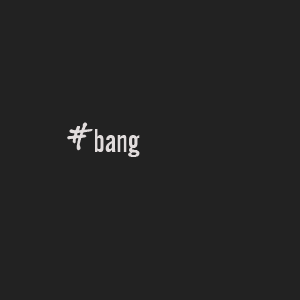
<style>
.page{position:relative;width:300px;height:300px;background:#222222}
.page>*{position:absolute;margin:0}
.t1{font:39px "BuxtonSketch";color:#e1dcdc}
.t2{font:32px "AlternateGothicNo2BT-Regular";color:#e1dcdc}
</style>
<div class="page">
<p class="t1" style="left:67px;top:122px;width:26px;height:29px">#</p>
<p class="t2" style="left:95px;top:129px;width:45px;height:28px">bang</p>
</div>
